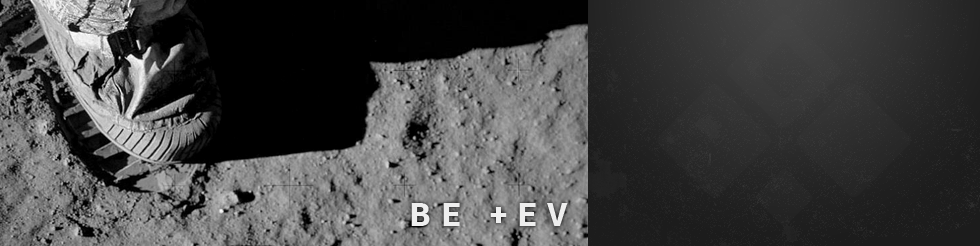
<style>
.page{position:relative;width:980px;height:246px}
.page>*{position:absolute;margin:0}
.t1{font:32px "Roboto-Black";letter-spacing:0.34em;color:#eeeeee}
</style>
<div class="page">
<p class="t1" style="left:411px;top:203px;width:157px;height:23px">BE +EV</p>
</div>
